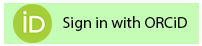
<style>
.page{position:relative;width:202px;height:46px;background:#c5fdb6}
.page>*{position:absolute;margin:0}
.t1{font:16px "MyriadPro-Regular";color:#000000}
</style>
<div class="page">
<p class="t1" style="left:63px;top:16px;width:124px;height:15px">Sign in with ORCiD</p>
</div>
